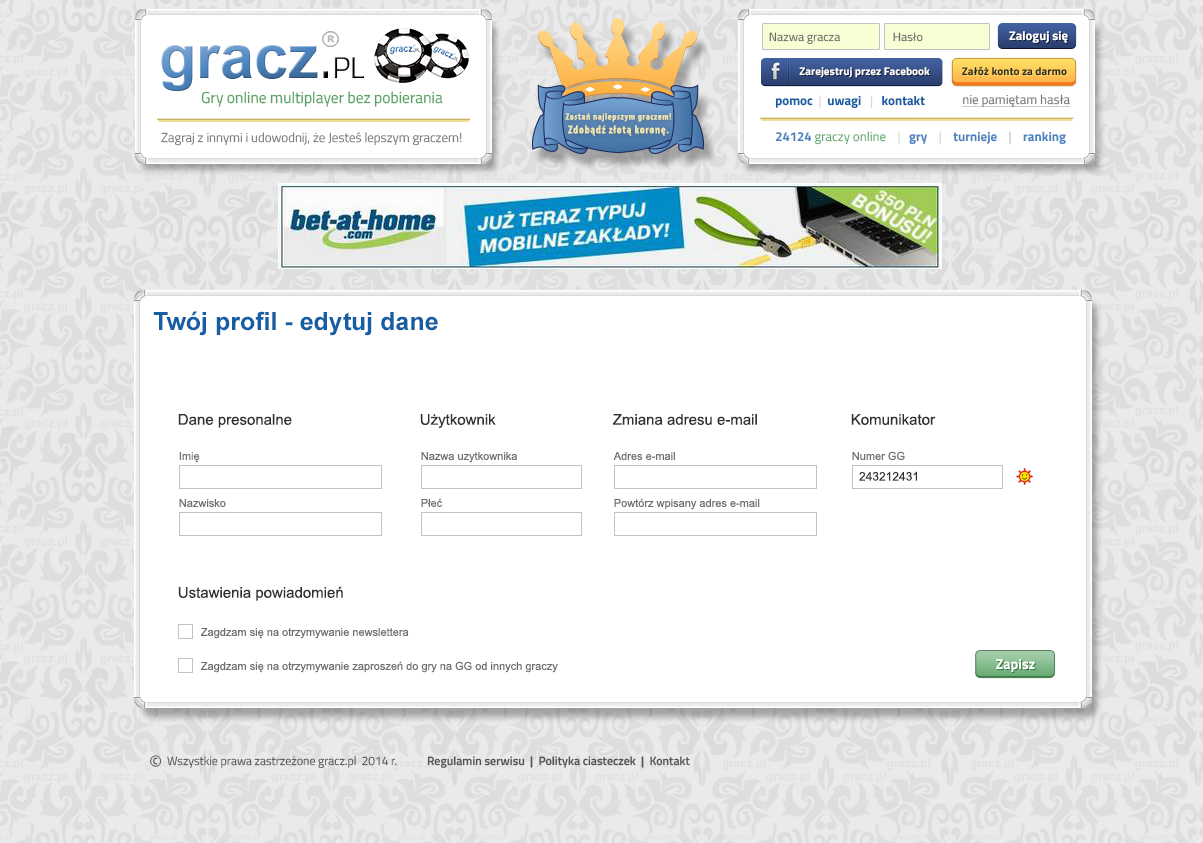
<style>
.page{position:relative;width:1203px;height:843px;background:#ffffff}
.page>*{position:absolute;margin:0}
.t1{font:12px "TitilliumWeb-Regular";color:#6a6a6a}
.t2{font:12.5px "TitilliumWeb-Bold";color:#ffffff}
.t3{font:11.1px "TitilliumWeb-Bold";color:#ffffff}
.t4{font:11.1px "TitilliumWeb-Bold";color:#292929}
.t5{font:15.7px "TitilliumWeb-Regular";color:#56a262}
.t6{font:13px "TitilliumWeb-Bold";color:#155ea3}
.t7{font:13px "TitilliumWeb-Regular";color:#d8d8d8}
.t8{font:13px "TitilliumWeb-Regular";color:#797979;text-decoration:underline}
.t9{font:9.4px "MyriadPro-BoldCond";letter-spacing:0.06em;color:#efe3af}
.t10{font:11.4px "MyriadPro-BoldCond";letter-spacing:0.06em;color:#efe3af}
.t11{font:13px "TitilliumWeb-Light";color:#787878}
.t12{font:13px "TitilliumWeb-Regular";color:#66a970}
.t13{font:13px "TitilliumWeb-Bold";color:#4c83bd}
.t14{font:13px "TitilliumWeb-Regular";color:#bdbdbd}
.t15{font:25px "Arial-BoldMT";color:#155ea3}
.t16{font:15px "ArialMT";color:#303030}
.t17{font:11px "ArialMT";color:#6e6e6e}
.t18{font:12px "ArialMT";color:#303030}
.t19{font:14.4px "TitilliumWeb-Bold";color:#ffffff}
.t20{font:20.5px "TitilliumWeb-Light";color:#535353}
.t21{font:12px "TitilliumWeb-Light";color:#535353}
.t22{font:12px "TitilliumWeb-SemiBold";color:#535353}
</style>
<div class="page">
<p class="t1" style="left:769px;top:32px;width:72px;height:12px">Nazwa gracza</p>
<p class="t1" style="left:893px;top:32px;width:30px;height:10px">Hasło</p>
<p class="t2" style="left:1009px;top:31px;width:59px;height:12px">Zaloguj się</p>
<p class="t3" style="left:799px;top:67px;width:131px;height:11px">Zarejestruj przez Facebook</p>
<p class="t4" style="left:962px;top:66px;width:105px;height:10px">Załóż konto za darmo</p>
<p class="t5" style="left:201px;top:91px;width:242px;height:16px">Gry online multiplayer bez pobierania</p>
<p class="t6" style="left:775px;top:95px;width:150px;height:14px">pomoc <span class="t7"> |  </span>uwagi   <span class="t7">|   </span>kontakt</p>
<p class="t8" style="left:962px;top:94px;width:108px;height:14px">nie pamiętam hasła</p>
<p class="t9" style="left:565px;top:113px;width:107px;height:23px;text-align:center">Zostań najlepszym graczem!<br><span class="t10">Zdobądź złotą koronę.</span></p>
<p class="t11" style="left:161px;top:132px;width:301px;height:14px">Zagraj z innymi i udowodnij, że Jesteś lepszym graczem!</p>
<p class="t12" style="left:775px;top:131px;width:291px;height:14px"><span class="t13">24124 </span>graczy online    <span class="t7">|   </span><span class="t13">gry    </span><span class="t7">|   </span><span class="t13"> turnieje    </span><span class="t14">|    </span><span class="t13">ranking</span></p>
<p class="t15" style="left:153px;top:311px;width:285px;height:25px">Twój profil - edytuj dane</p>
<p class="t16" style="left:178px;top:414px;width:114px;height:14px">Dane presonalne</p>
<p class="t16" style="left:420px;top:414px;width:76px;height:14px">Użytkownik</p>
<p class="t16" style="left:613px;top:414px;width:144px;height:11px">Zmiana adresu e-mail</p>
<p class="t16" style="left:851px;top:414px;width:85px;height:11px">Komunikator</p>
<p class="t17" style="left:179px;top:452px;width:21px;height:11px">Imię</p>
<p class="t17" style="left:421px;top:452px;width:96px;height:11px">Nazwa uzytkownika</p>
<p class="t17" style="left:613px;top:452px;width:62px;height:9px">Adres e-mail</p>
<p class="t17" style="left:852px;top:451px;width:53px;height:10px">Numer GG</p>
<p class="t18" style="left:859px;top:471px;width:58px;height:10px">243212431</p>
<p class="t17" style="left:179px;top:499px;width:47px;height:9px">Nazwisko</p>
<p class="t17" style="left:421px;top:498px;width:22px;height:10px">Płeć</p>
<p class="t17" style="left:614px;top:498px;width:146px;height:12px">Powtórz wpisany adres e-mail</p>
<p class="t16" style="left:178px;top:586px;width:165px;height:15px">Ustawienia powiadomień</p>
<p class="t17" style="left:201px;top:628px;width:208px;height:11px">Zagdzam się na otrzymywanie newslettera</p>
<p class="t17" style="left:201px;top:661px;width:357px;height:12px">Zagdzam się na otrzymywanie zaproszeń do gry na GG od innych graczy</p>
<p class="t19" style="left:996px;top:658px;width:39px;height:15px">Zapisz</p>
<p class="t20" style="left:150px;top:755px;width:12px;height:12px">©</p>
<p class="t21" style="left:167px;top:756px;width:230px;height:12px">Wszystkie prawa zastrzeżone gracz.pl  2014 r.</p>
<p class="t22" style="left:427px;top:756px;width:263px;height:12px">Regulamin serwisu  |  Polityka ciasteczek  |  Kontakt</p>
</div>
